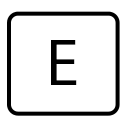
<style>
.page{position:relative;width:128px;height:128px;background:#ffffff}
.page>*{position:absolute;margin:0}
.t1{font:66.7px "MyriadPro-Regular";color:#000000}
</style>
<div class="page">
<p class="t1" style="left:51px;top:40px;width:26px;height:45px">E</p>
</div>
